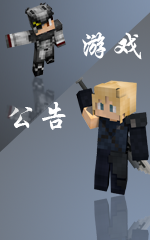
<style>
.page{position:relative;width:150px;height:240px}
.page>*{position:absolute;margin:0}
.t1{font:32px "STXingkai";letter-spacing:0.05em;color:#ffffff}
</style>
<div class="page">
<p class="t1" style="left:82px;top:32px;width:60px;height:28px">游戏</p>
<p class="t1" style="left:8px;top:102px;width:58px;height:28px">公告</p>
</div>
